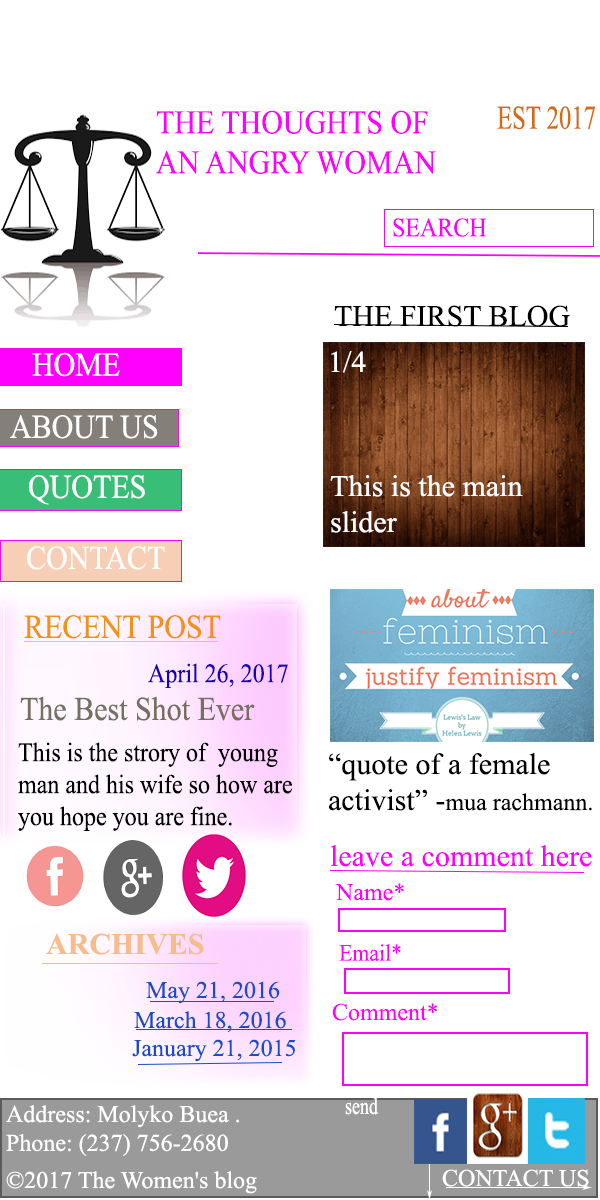
<style>
.page{position:relative;width:600px;height:1200px;background:#ffffff}
.page>*{position:absolute;margin:0}
.t1{font:33.3px "TimesNewRomanPSMT";color:#ff00ff;scale:0.9 1}
.t2{font:33.2px "TimesNewRomanPSMT";color:#d76b14;scale:0.74 1}
.t3{font:26.7px "TimesNewRomanPSMT";color:#ff00ff;scale:0.9 1}
.t4{font:30px "TimesNewRomanPSMT";color:#000000}
.t5{font:33.3px "TimesNewRomanPSMT";color:#ffffff;scale:0.9 1}
.t6{font:30px "TimesNewRomanPSMT";color:#ffffff}
.t7{font:33.3px "TimesNewRomanPSMT";scale:0.9 1}
.t8{font:33.3px "TimesNewRomanPSMT";color:#f29317;scale:0.9 1}
.t9{font:26.7px "TimesNewRomanPSMT";color:#1701b9;scale:0.9 1}
.t10{font:33.3px "TimesNewRomanPSMT";color:#786f63;scale:0.9 1}
.t11{font:26.7px "TimesNewRomanPSMT";color:#000000;scale:0.9 1}
.t12{font:24px "TimesNewRomanPSMT";color:#000000}
.t13{font:30px "TimesNewRomanPSMT";color:#ff00ff}
.t14{font:24px "TimesNewRomanPSMT";color:#ff00ff}
.t15{font:30px "TimesNewRomanPS-BoldMT";color:#f7bc8c}
.t16{font:23.7px "TimesNewRomanPSMT";color:#ff00ff;scale:0.92 1}
.t17{font:24px "TimesNewRomanPSMT";color:#174dc7}
.t18{font:24px "TimesNewRomanPSMT";color:#ffffff;scale:0.75 1}
.t19{font:24px "TimesNewRomanPSMT";color:#ffffff}
</style>
<div class="page">
<p class="t1" style="left:156px;top:110px;width:280px;height:64px">THE THOUGHTS OF<br>AN ANGRY WOMAN</p>
<p class="t2" style="left:497px;top:106px;width:98px;height:24px">EST 2017</p>
<p class="t3" style="left:393px;top:218px;width:94px;height:19px">SEARCH</p>
<p class="t4" style="left:334px;top:305px;width:236px;height:22px">THE FIRST BLOG</p>
<p class="t5" style="left:32px;top:352px;width:88px;height:25px">HOME</p>
<p class="t6" style="left:331px;top:351px;width:35px;height:22px">1/4</p>
<p class="t7" style="left:20px;top:357px;width:22px;height:23px">H</p>
<p class="t5" style="left:10px;top:415px;width:148px;height:24px">ABOUT US</p>
<p class="t5" style="left:29px;top:475px;width:116px;height:30px">QUOTES</p>
<p class="t6" style="left:330px;top:475px;width:193px;height:58px">This is the main <br>slider</p>
<p class="t5" style="left:27px;top:546px;width:138px;height:24px">CONTACT</p>
<p class="t8" style="left:24px;top:615px;width:197px;height:24px">RECENT POST</p>
<p class="t9" style="left:148px;top:663px;width:140px;height:25px">April 26, 2017</p>
<p class="t10" style="left:20px;top:696px;width:235px;height:25px">The Best Shot Ever</p>
<p class="t11" style="left:18px;top:742px;width:274px;height:89px">This is the strory of  young <br>man and his wife so how are<br>you hope you are fine.</p>
<p class="t4" style="left:328px;top:753px;width:264px;height:58px">“quote of a female <br>activist” -<span class="t12">mua rachmann.</span></p>
<p class="t13" style="left:330px;top:845px;width:262px;height:22px">leave a comment here</p>
<p class="t14" style="left:335px;top:883px;width:69px;height:18px">Name*</p>
<p class="t15" style="left:46px;top:933px;width:158px;height:22px">ARCHIVES</p>
<p class="t16" style="left:339px;top:944px;width:62px;height:17px">Email*</p>
<p class="t17" style="left:146px;top:981px;width:134px;height:23px">May 21, 2016</p>
<p class="t17" style="left:134px;top:1011px;width:152px;height:21px">March 18, 2016</p>
<p class="t14" style="left:332px;top:1003px;width:105px;height:18px">Comment*</p>
<p class="t17" style="left:132px;top:1039px;width:164px;height:23px">January 21, 2015</p>
<p class="t18" style="left:345px;top:1097px;width:34px;height:18px">send</p>
<p class="t19" style="left:6px;top:1105px;width:233px;height:51px">Address: Molyko Buea .<br>Phone: (237) 756‑2680</p>
<p class="t19" style="left:442px;top:1169px;width:147px;height:18px">CONTACT US</p>
<p class="t19" style="left:6px;top:1171px;width:251px;height:23px">©2017 The Women's blog</p>
</div>
